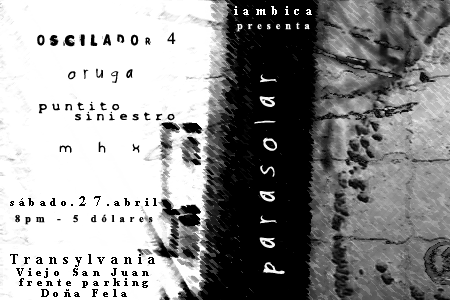
<style>
.page{position:relative;width:450px;height:300px;background:#ffffff}
.page>*{position:absolute;margin:0}
.t1{font:12.5px "TimesNewRomanPS-BoldMT";letter-spacing:0.475em;color:#ffffff}
.t2{font:10.4px "TimesNewRomanPS-BoldMT";letter-spacing:0.475em;color:#ffffff}
.t3{font:12.5px "Polaroid22";letter-spacing:0.475em;color:#010101}
.t4{font:16.7px "TimesNewRomanPSMT";letter-spacing:0.475em;color:#010101}
.t5{font:16.7px "Psycho-Poetry-Regular";letter-spacing:0.475em;color:#000000}
.t6{font:29.2px "Psycho-Poetry-Regular";letter-spacing:0.475em;color:#f8f8f8}
.t7{font:11.2px "X-Files-Regular";letter-spacing:0.475em;color:#000000}
.t8{font:11.2px "X-Files-Regular";letter-spacing:0.475em;color:#010101}
.t9{font:20.8px "Frazzed";letter-spacing:0.475em;color:#000000}
.t10{font:10.4px "TimesNewRomanPS-BoldMT";letter-spacing:0.475em;color:#010101}
.t11{font:14.6px "TimesNewRomanPS-BoldMT";letter-spacing:0.475em;color:#010101}
.t12{font:13.3px "TimesNewRomanPS-BoldMT";letter-spacing:0.475em;color:#010101}
.t13{font:10.4px "TimesNewRomanPS-BoldMT";letter-spacing:0.475em;color:#000000}
</style>
<div class="page">
<p class="t1" style="left:234px;top:6px;width:78px;height:9px">iambica</p>
<p class="t2" style="left:237px;top:22px;width:73px;height:10px">presenta</p>
<p class="t3" style="left:37px;top:32px;width:139px;height:15px">oscilador <span class="t4">4</span></p>
<p class="t5" style="left:68px;top:68px;width:65px;height:15px">oruga</p>
<p class="t6" style="left:254px;top:74px;width:31px;height:200px;rotate:-90deg">parasolar</p>
<p class="t7" style="left:38px;top:101px;width:82px;height:13px">puntito</p>
<p class="t8" style="left:75px;top:111px;width:100px;height:10px">siniestro</p>
<p class="t9" style="left:59px;top:141px;width:81px;height:12px">m h x</p>
<p class="t10" style="left:10px;top:196px;width:147px;height:10px">sábado.<span class="t11">27</span>.abril</p>
<p class="t10" style="left:15px;top:214px;width:138px;height:11px">8pm - 5 dólares</p>
<p class="t12" style="left:10px;top:254px;width:145px;height:13px">Transylvania</p>
<p class="t13" style="left:16px;top:268px;width:133px;height:10px">Viejo San Juan</p>
<p class="t10" style="left:19px;top:278px;width:129px;height:10px">frente parking</p>
<p class="t10" style="left:41px;top:289px;width:86px;height:8px">Doña Fela</p>
</div>
